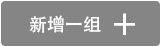
<style>
.page{position:relative;width:161px;height:47px;background:#858585}
.page>*{position:absolute;margin:0}
.t1{font:18px "AdobeHeitiStd-Regular";color:#ffffff}
.t2{font:36px "AdobeHeitiStd-Regular";color:#ffffff}
</style>
<div class="page">
<p class="t1" style="left:29px;top:15px;width:72px;height:18px">新增一组</p>
<p class="t2" style="left:114px;top:13px;width:21px;height:22px">+</p>
</div>
